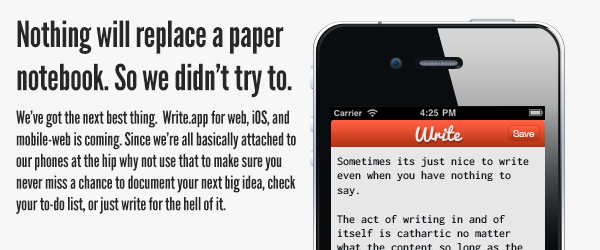
<style>
.page{position:relative;width:600px;height:250px;background:#f7f7f7}
.page>*{position:absolute;margin:0}
.t1{font:18px "LeagueGothic";letter-spacing:-0.01em;color:#272727}
.t2{font:36px "LeagueGothic";letter-spacing:-0.01em;color:#272727}
.t3{font:18px "Pacifico-Regular";color:#e7e7e8}
.t4{font:10px "HelveticaNeue";color:#e7e7e8}
</style>
<div class="page">
<p class="t1" style="left:16px;top:20px;width:280px;height:194px"><span class="t2">Nothing will replace a paper notebook. So we didn’t try to.<br><br></span>We’ve got the next best thing.  Write.app for web, iOS, and mobile-web is coming. Since we’re all basically attached to our phones at the hip why not use that to make sure you never miss a chance to document your next big idea, check your to-do list, or just write for the hell of it.</p>
<p class="t3" style="left:415px;top:125px;width:48px;height:17px">Write</p>
<p class="t4" style="left:513px;top:130px;width:22px;height:7px">Save</p>
</div>
